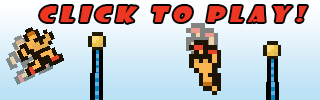
<style>
.page{position:relative;width:320px;height:100px}
.page>*{position:absolute;margin:0}
.t1{font:20.8px "ShowcardGothic-Reg";letter-spacing:0.18em;color:#ee3624;font-style:italic;scale:1.31 1}
</style>
<div class="page">
<p class="t1" style="left:40px;top:6px;width:267px;height:17px">Click To Play!</p>
</div>
